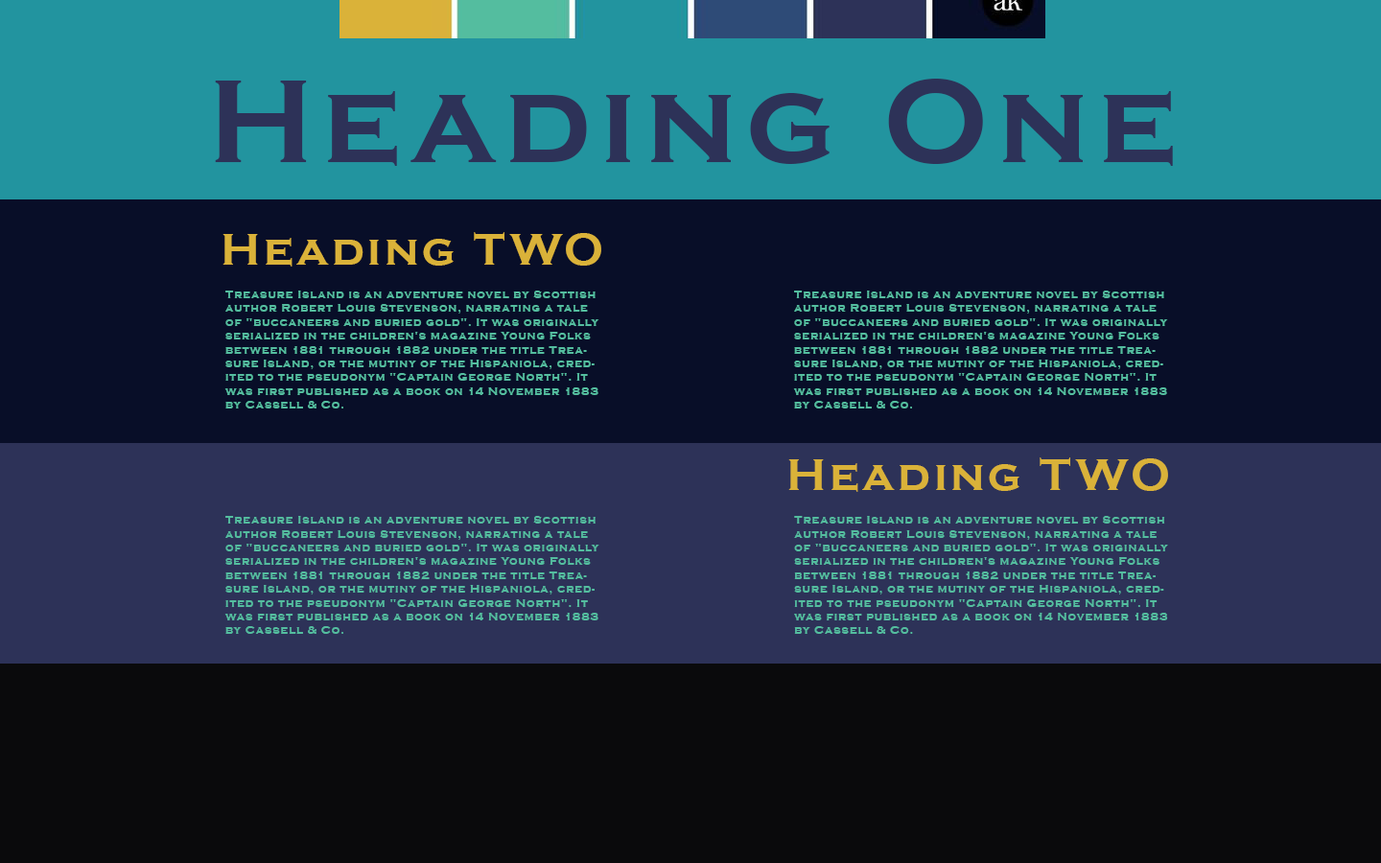
<style>
.page{position:relative;width:1381px;height:863px;background:#080e28}
.page>*{position:absolute;margin:0}
.t1{font:122.8px "CopperplateGothic-Bold";letter-spacing:0.075em;color:#2d3258}
.t2{font:46px "CopperplateGothic-Bold";letter-spacing:0.075em;color:#dab239}
.t3{font:11.5px "CopperplateGothic-Bold";letter-spacing:0.075em;color:#54bd9f}
.t4{font:46.1px "CopperplateGothic-Bold";letter-spacing:0.075em;color:#dab239}
</style>
<div class="page">
<p class="t1" style="left:215px;top:79px;width:958px;height:87px">Heading One</p>
<p class="t2" style="left:223px;top:232px;width:378px;height:35px">Heading TWO</p>
<p class="t3" style="left:224px;top:291px;width:376px;height:118px">Treasure Island is an adventure novel by Scottish author Robert Louis Stevenson, narrating a tale of "buccaneers and buried gold". It was originally serialized in the children's magazine Young Folks between 1881 through 1882 under the title Treasure Island, or the mutiny of the Hispaniola, credited to the pseudonym "Captain George North". It was first published as a book on 14 November 1883 by Cassell &amp; Co.</p>
<p class="t3" style="left:793px;top:291px;width:375px;height:118px">Treasure Island is an adventure novel by Scottish author Robert Louis Stevenson, narrating a tale of "buccaneers and buried gold". It was originally serialized in the children's magazine Young Folks between 1881 through 1882 under the title Treasure Island, or the mutiny of the Hispaniola, credited to the pseudonym "Captain George North". It was first published as a book on 14 November 1883 by Cassell &amp; Co.</p>
<p class="t4" style="left:788px;top:458px;width:380px;height:34px">Heading TWO</p>
<p class="t3" style="left:224px;top:516px;width:376px;height:118px">Treasure Island is an adventure novel by Scottish author Robert Louis Stevenson, narrating a tale of "buccaneers and buried gold". It was originally serialized in the children's magazine Young Folks between 1881 through 1882 under the title Treasure Island, or the mutiny of the Hispaniola, credited to the pseudonym "Captain George North". It was first published as a book on 14 November 1883 by Cassell &amp; Co.</p>
<p class="t3" style="left:794px;top:516px;width:374px;height:118px">Treasure Island is an adventure novel by Scottish author Robert Louis Stevenson, narrating a tale of "buccaneers and buried gold". It was originally serialized in the children's magazine Young Folks between 1881 through 1882 under the title Treasure Island, or the mutiny of the Hispaniola, credited to the pseudonym "Captain George North". It was first published as a book on 14 November 1883 by Cassell &amp; Co.</p>
</div>
